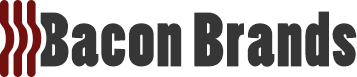
<style>
.page{position:relative;width:357px;height:77px;background:#ffffff}
.page>*{position:absolute;margin:0}
.t1{font:72px "PoplarStd";letter-spacing:0.02em;color:#363636}
</style>
<div class="page">
<p class="t1" style="left:39px;top:11px;width:318px;height:56px">Bacon Brands</p>
</div>
